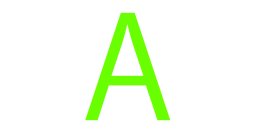
<style>
.page{position:relative;width:256px;height:128px;background:#ffffff}
.page>*{position:absolute;margin:0}
.t1{font:140.9px "KozGoPr6N-Regular";color:#6aff00;font-weight:bold}
</style>
<div class="page">
<p class="t1" style="left:85px;top:12px;width:86px;height:109px">A</p>
</div>
